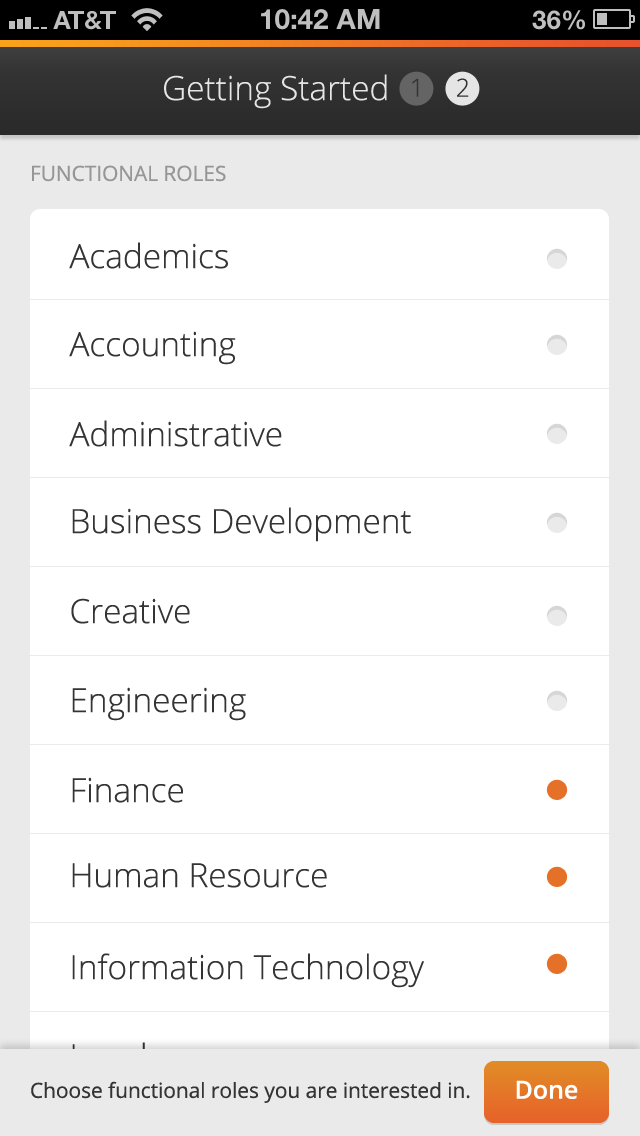
<style>
.page{position:relative;width:640px;height:1136px;background:#ffffff}
.page>*{position:absolute;margin:0}
.t1{font:33.3px "OpenSans-Light";color:#e5e5e5}
.t2{font:25px "OpenSans-Light";color:#343434}
.t3{font:20.8px "OpenSans";color:#969696}
.t4{font:33.3px "OpenSans-Light";color:#343434}
.t5{font:20.8px "OpenSans";color:#343434}
.t6{font:25px "OpenSans-Semibold";color:#ffffff}
</style>
<div class="page">
<p class="t1" style="left:164px;top:74px;width:223px;height:35px">Getting Started</p>
<p class="t2" style="left:412px;top:78px;width:7px;height:19px">1</p>
<p class="t2" style="left:457px;top:78px;width:12px;height:19px">2</p>
<p class="t3" style="left:32px;top:165px;width:194px;height:17px">FUNCTIONAL ROLES</p>
<p class="t4" style="left:69px;top:242px;width:159px;height:27px">Academics</p>
<p class="t4" style="left:69px;top:331px;width:167px;height:34px">Accounting</p>
<p class="t4" style="left:69px;top:420px;width:213px;height:27px">Administrative</p>
<p class="t4" style="left:72px;top:507px;width:339px;height:35px">Business Development</p>
<p class="t4" style="left:71px;top:598px;width:119px;height:26px">Creative</p>
<p class="t4" style="left:72px;top:687px;width:174px;height:34px">Engineering</p>
<p class="t4" style="left:72px;top:777px;width:111px;height:26px">Finance</p>
<p class="t4" style="left:72px;top:863px;width:255px;height:25px">Human Resource</p>
<p class="t4" style="left:72px;top:953px;width:352px;height:35px">Information Technology</p>
<p class="t5" style="left:31px;top:1081px;width:439px;height:22px">Choose functional roles you are interested in.</p>
<p class="t6" style="left:516px;top:1080px;width:62px;height:19px">Done</p>
</div>
